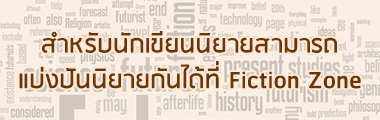
<style>
.page{position:relative;width:380px;height:120px;background:#faeee2}
.page>*{position:absolute;margin:0}
.t1{font:29.6px "RSU-Bold";color:#6b3600}
</style>
<div class="page">
<p class="t1" style="left:19px;top:31px;width:342px;height:58px;text-align:center">สำหรับนักเขียนนิยายสามารถ<br>แบ่งปันนิยายกันได้ที่ Fiction Zone</p>
</div>
